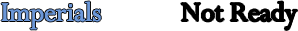
<style>
.page{position:relative;width:298px;height:31px;background:#ffffff}
.page>*{position:absolute;margin:0}
.t1{font:30px "Perpetua";color:#6c98d9}
.t2{font:30px "Perpetua";color:#000000}
</style>
<div class="page">
<p class="t1" style="left:1px;top:1px;width:296px;height:29px">Imperials   <span class="t2">Not Ready</span></p>
</div>
